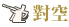
<style>
.page{position:relative;width:69px;height:27px;background:#ffffff}
.page>*{position:absolute;margin:0}
.t1{font:18px "RyuminPro-Heavy";color:#ae9442}
</style>
<div class="page">
<p class="t1" style="left:33px;top:4px;width:35px;height:18px">對空</p>
</div>
